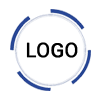
<style>
.page{position:relative;width:100px;height:100px;background:#ffffff}
.page>*{position:absolute;margin:0}
.t1{font:20px "Roboto-Regular";color:#000000;font-weight:bold}
</style>
<div class="page">
<p class="t1" style="left:26px;top:42px;width:52px;height:16px">LOGO</p>
</div>
